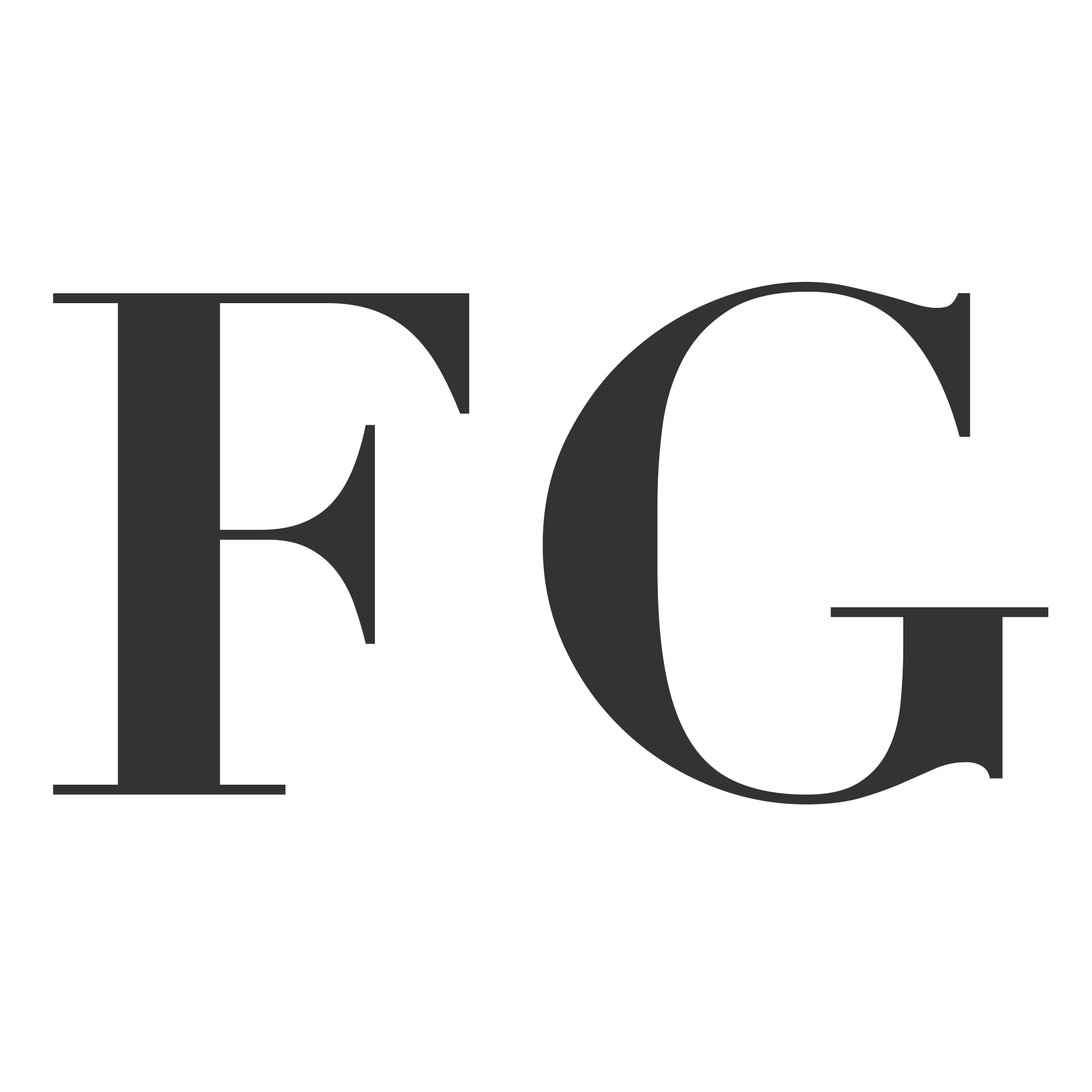
<style>
.page{position:relative;width:1092px;height:1092px;background:#ffffff}
.page>*{position:absolute;margin:0}
.t1{font:704.2px "Didot-Bold";color:#333333}
</style>
<div class="page">
<p class="t1" style="left:53px;top:282px;width:995px;height:522px">FG</p>
</div>
